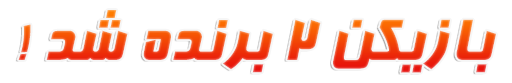
<style>
.page{position:relative;width:512px;height:83px;background:#ffffff}
.page>*{position:absolute;margin:0}
.t1{font:70px "BFarnaz"}
</style>
<div class="page">
<p class="t1" style="left:18px;top:10px;width:478px;height:63px">! بازیکن 2 برنده شد</p>
</div>
